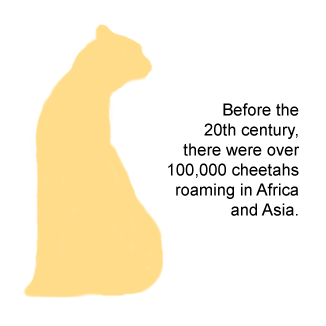
<style>
.page{position:relative;width:326px;height:326px;background:#ffffff}
.page>*{position:absolute;margin:0}
.t1{font:16.7px "ArialMT";color:#000000}
</style>
<div class="page">
<p class="t1" style="left:168px;top:103px;width:132px;height:113px;text-align:right">Before the<br>20th century,<br>there were over<br>100,000 cheetahs<br>roaming in Africa<br>and Asia.</p>
</div>
